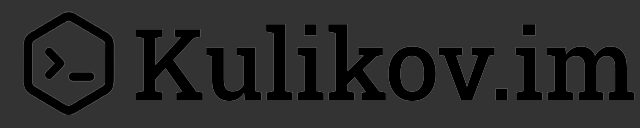
<style>
.page{position:relative;width:640px;height:128px;background:#333333}
.page>*{position:absolute;margin:0}
.t1{font:99.6px "RobotoSlab-Medium";color:#000000}
</style>
<div class="page">
<p class="t1" style="left:135px;top:24px;width:500px;height:78px">Kulikov.im</p>
<p class="t1" style="left:135px;top:24px;width:500px;height:78px">Kulikov.im</p>
</div>
